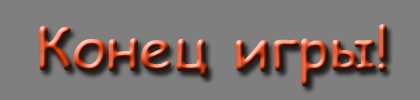
<style>
.page{position:relative;width:420px;height:100px;background:#7f7f7f}
.page>*{position:absolute;margin:0}
.t1{font:58.3px "ComicSansMS-Bold"}
</style>
<div class="page">
<p class="t1" style="left:39px;top:24px;width:348px;height:63px">Конец игры!</p>
</div>
